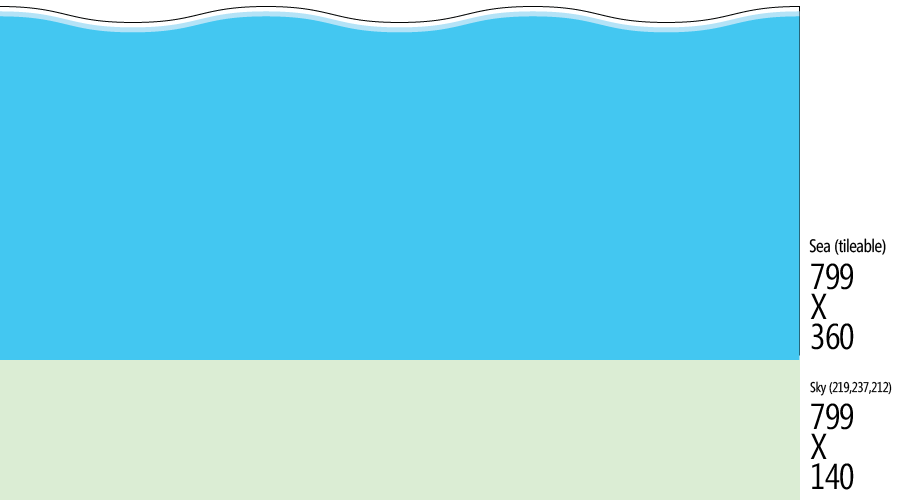
<style>
.page{position:relative;width:900px;height:500px;background:#43c7f1}
.page>*{position:absolute;margin:0}
.t1{font:18px "SegoeCondensed";letter-spacing:-0.02em;color:#000000}
.t2{font:36px/30px "SegoeCondensed";letter-spacing:-0.02em;color:#000000}
.t3{font:14px "SegoeCondensed";letter-spacing:-0.02em;color:#000000}
</style>
<div class="page">
<p class="t1" style="left:809px;top:238px;width:77px;height:17px">Sea (tileable)</p>
<p class="t2" style="left:810px;top:263px;width:44px;height:87px">799<br>X<br>360</p>
<p class="t3" style="left:810px;top:381px;width:82px;height:15px">Sky (219,237,212)</p>
<p class="t2" style="left:810px;top:403px;width:44px;height:87px">799<br>X<br>140</p>
</div>
